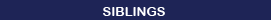
<style>
.page{position:relative;width:271px;height:20px;background:#1e2456}
.page>*{position:absolute;margin:0}
.t1{font:13px "ArialRoundedMTBold";color:#ffffff}
</style>
<div class="page">
<p class="t1" style="left:103px;top:7px;width:62px;height:9px">SIBLINGS</p>
</div>
